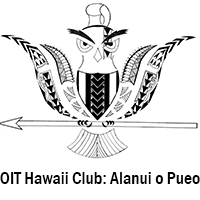
<style>
.page{position:relative;width:200px;height:200px;background:#ffffff}
.page>*{position:absolute;margin:0}
.t1{font:18px "FranklinGothic-MediumCond";color:#000000}
</style>
<div class="page">
<p class="t1" style="left:0px;top:172px;width:200px;height:12px">OIT Hawaii Club: Alanui o Pueo</p>
</div>
